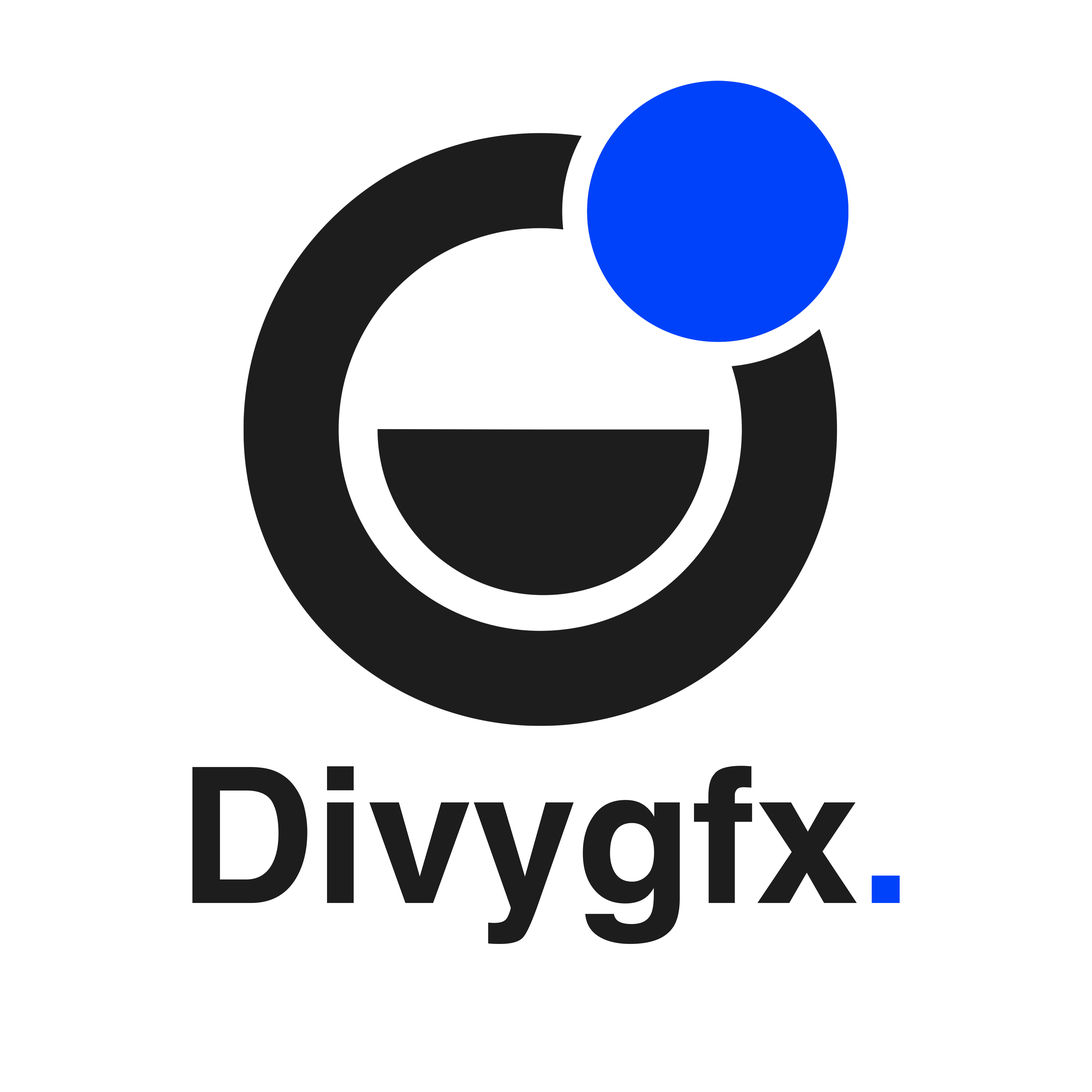
<style>
.page{position:relative;width:1092px;height:1092px;background:#ffffff}
.page>*{position:absolute;margin:0}
.t1{font:188.8px "Helvetica-Bold";color:#1d1d1d}
.t2{font:188.8px "Helvetica-Bold";color:#0042fa}
</style>
<div class="page">
<p class="t1" style="left:192px;top:766px;width:708px;height:178px">Divygfx<span class="t2">.</span></p>
</div>
